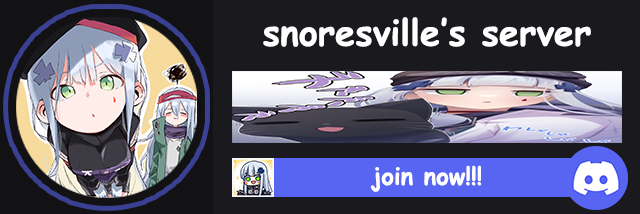
<style>
.page{position:relative;width:640px;height:214px;background:#1a1a1e}
.page>*{position:absolute;margin:0}
.t1{font:36px "ComicSansMS-Bold";color:#ffffff}
.t2{font:24px "ComicSansMS-Bold";color:#ffffff}
</style>
<div class="page">
<p class="t1" style="left:263px;top:17px;width:328px;height:30px">snoresville’s server</p>
<p class="t2" style="left:370px;top:165px;width:112px;height:27px">join now!!!</p>
</div>
